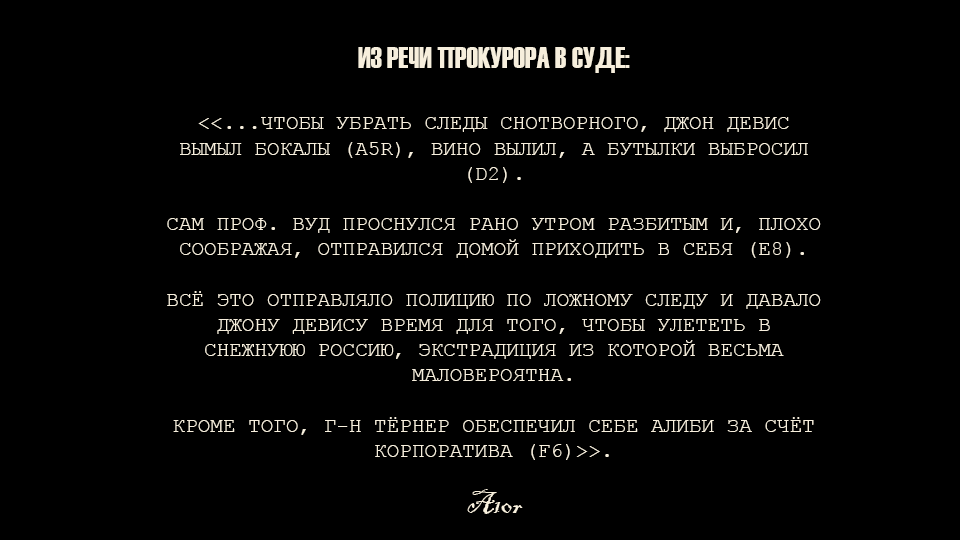
<style>
.page{position:relative;width:960px;height:540px;background:#000000}
.page>*{position:absolute;margin:0}
.t1{font:21px "CourierNewPSMT";color:#f7efdd;text-transform:uppercase}
.t2{font:30.1px "Haettenschweiler";color:#f7efdd;text-transform:uppercase}
.t3{font:31px "BlackadderITC-Regular";color:#f9f1de}
</style>
<div class="page">
<p class="t1" style="left:167px;top:47px;width:654px;height:413px;text-align:center"><span class="t2">Из речи прокурора в суде:<br><br></span>&lt;&lt;...Чтобы убрать следы снотворного, Джон Девис вымыл бокалы (A5r), вино вылил, а бутылки выбросил (D2).<br><br>Сам проф. Вуд проснулся рано утром разбитым и, плохо соображая, отправился домой приходить в себя (E8).<br><br>Всё это отправляло полицию по ложному следу и давало Джону Девису время для того, чтобы улететь в снежнуюю Россию, экстрадиция из которой весьма маловероятна.<br><br>Кроме того, г-н Тёрнер обеспечил себе алиби за счёт корпоратива (F6)&gt;&gt;.</p>
<p class="t3" style="left:467px;top:489px;width:56px;height:25px">A10r</p>
</div>
